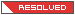
<style>
.page{position:relative;width:75px;height:15px;background:#e23333}
.page>*{position:absolute;margin:0}
.t1{font:8px "BitDustTwo";color:#ffffff}
</style>
<div class="page">
<p class="t1" style="left:19px;top:5px;width:47px;height:5px">RESOLVED</p>
</div>
